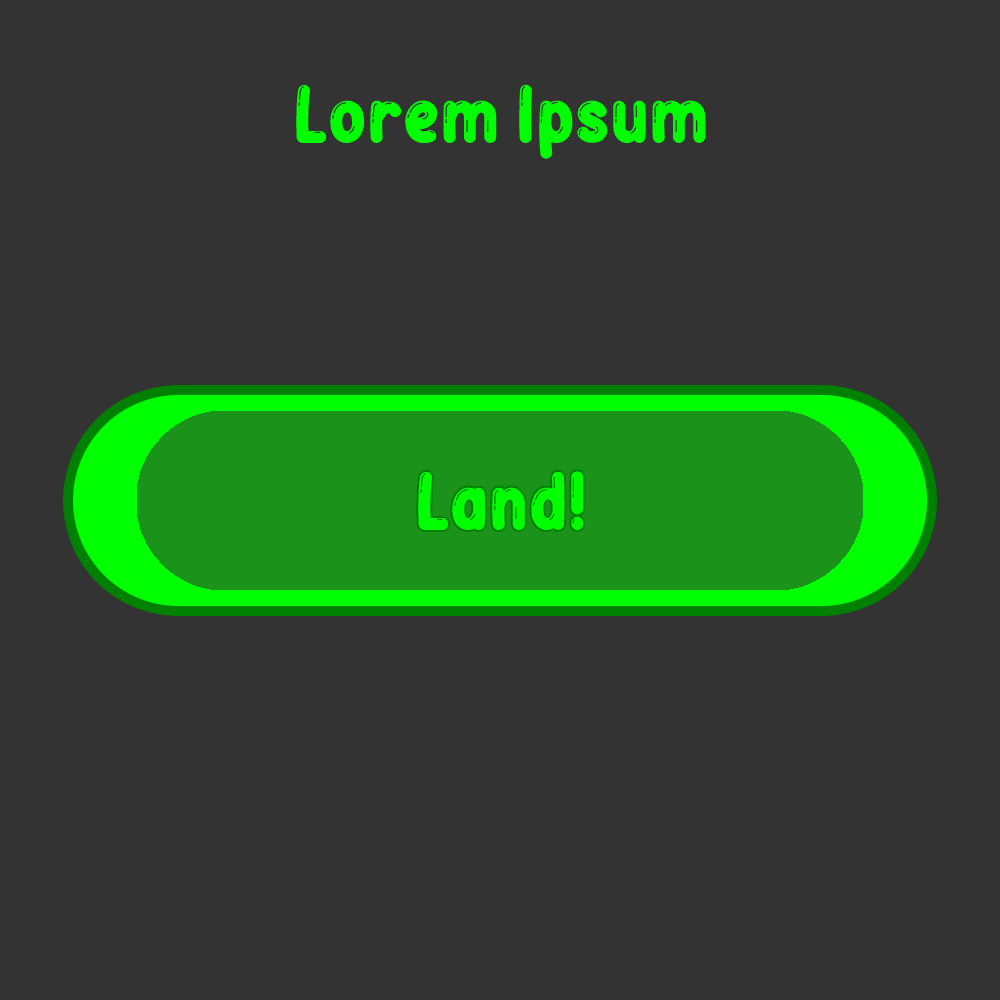
<style>
.page{position:relative;width:1000px;height:1000px;background:#333333}
.page>*{position:absolute;margin:0}
.t1{font:83.3px "BubbleBobble";color:#00ff00}
</style>
<div class="page">
<p class="t1" style="left:296px;top:84px;width:410px;height:75px">Lorem Ipsum</p>
<p class="t1" style="left:418px;top:471px;width:166px;height:59px">Land!</p>
</div>
